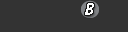
<style>
.page{position:relative;width:128px;height:32px;background:#333333}
.page>*{position:absolute;margin:0}
.t1{font:18px "DomDiagonalBT-Regular";letter-spacing:0.075em;color:#ffffff}
</style>
<div class="page">
<p class="t1" style="left:85px;top:3px;width:9px;height:12px">B</p>
</div>
